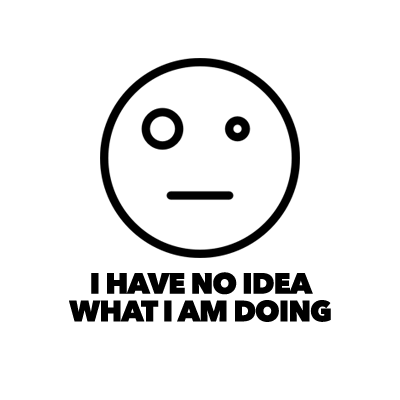
<style>
.page{position:relative;width:400px;height:400px;background:#ffffff}
.page>*{position:absolute;margin:0}
.t1{font:29px/27.7px "AvenirNext-Heavy";letter-spacing:-0.04em;color:#000000}
</style>
<div class="page">
<p class="t1" style="left:69px;top:272px;width:262px;height:50px;text-align:center">I HAVE NO IDEA<br>WHAT I AM DOING</p>
</div>
